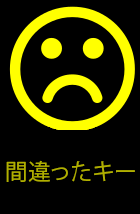
<style>
.page{position:relative;width:140px;height:214px;background:#000000}
.page>*{position:absolute;margin:0}
.t1{font:22.5px "KozGoPr6N-Regular";color:#b0af00}
</style>
<div class="page">
<p class="t1" style="left:6px;top:160px;width:129px;height:22px">間違ったキー</p>
</div>
